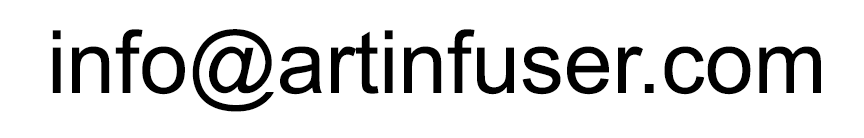
<style>
.page{position:relative;width:864px;height:138px;background:#ffffff}
.page>*{position:absolute;margin:0}
.t1{font:87.5px "ArialMT";color:#000000}
</style>
<div class="page">
<p class="t1" style="left:52px;top:29px;width:769px;height:83px">info@artinfuser.com</p>
</div>
